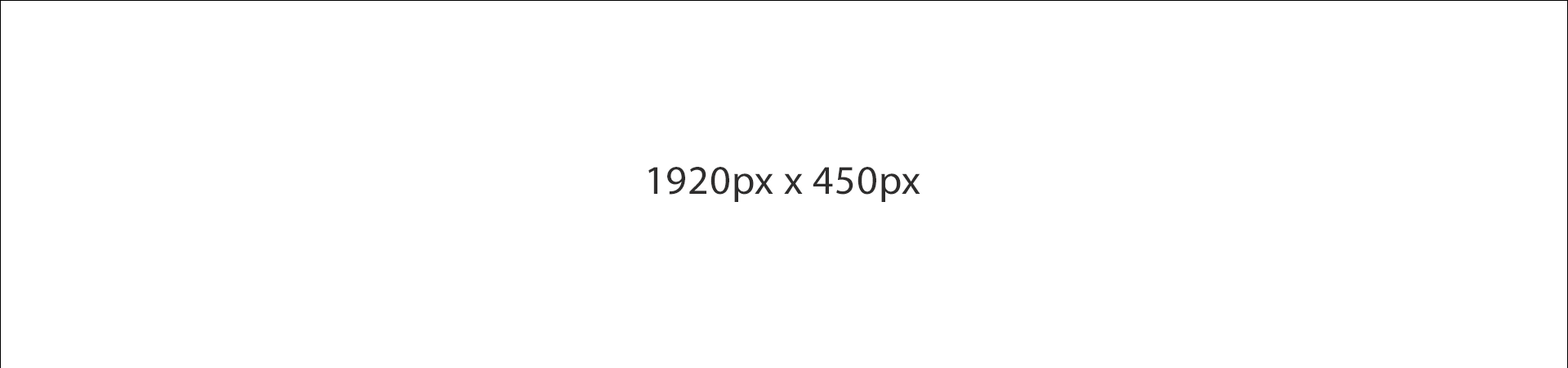
<style>
.page{position:relative;width:1568px;height:368px;background:#ffffff}
.page>*{position:absolute;margin:0}
.t1{font:40.8px "MyriadPro-Regular";letter-spacing:0.015em;color:#2e2d2d}
</style>
<div class="page">
<p class="t1" style="left:648px;top:167px;width:272px;height:35px">1920px x 450px</p>
</div>
